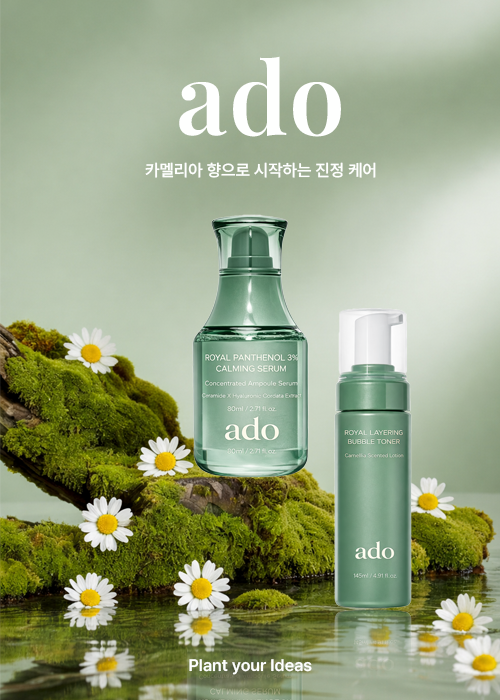
<style>
.page{position:relative;width:500px;height:700px}
.page>*{position:absolute;margin:0}
.t1{font:100px "PlayfairDisplayRoman-SemiBold";letter-spacing:0.01em;color:#fefffe}
.t2{font:16.7px "Pretendard-SemiBold";color:#fefffe}
</style>
<div class="page">
<p class="t1" style="left:179px;top:56px;width:162px;height:81px">ado</p>
<p class="t2" style="left:145px;top:162px;width:231px;height:16px">카멜리아 향으로 시작하는 진정 케어</p>
<p class="t2" style="left:189px;top:659px;width:123px;height:16px">Plant your Ideas</p>
</div>
